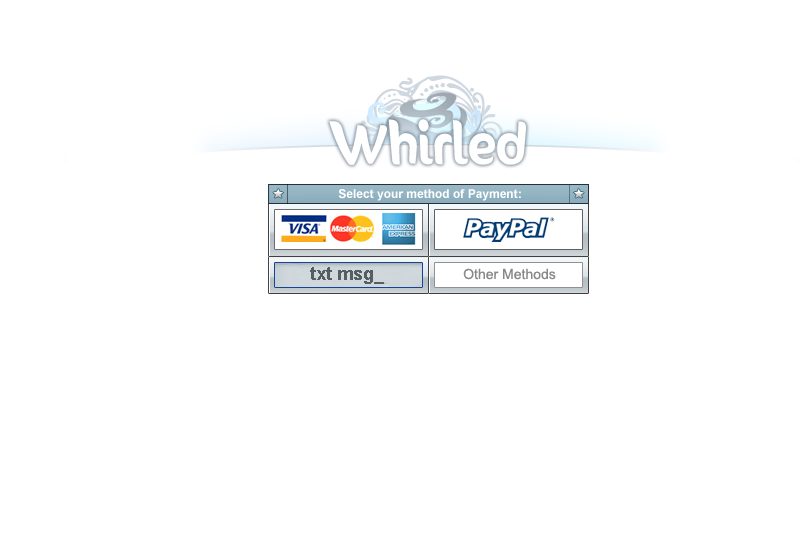
<style>
.page{position:relative;width:800px;height:550px;background:#ffffff}
.page>*{position:absolute;margin:0}
.t1{font:48px "SunnySide";color:#ffffff}
.t2{font:12px "Arial-BoldMT";color:#ffffff}
.t3{font:14px "ArialMT";color:#898989}
</style>
<div class="page">
<p class="t1" style="left:329px;top:119px;width:197px;height:46px">Whirled</p>
<p class="t2" style="left:338px;top:189px;width:183px;height:12px">Select your method of Payment:</p>
<p class="t3" style="left:463px;top:268px;width:93px;height:12px">Other Methods</p>
</div>
